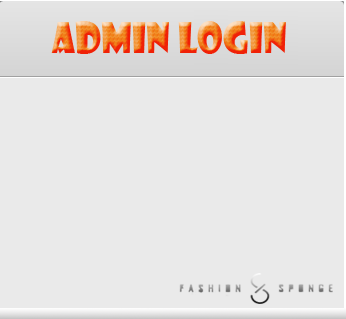
<style>
.page{position:relative;width:346px;height:319px;background:#eaeaea}
.page>*{position:absolute;margin:0}
.t1{font:41.2px "ShowcardGothic-Reg";scale:0.91 1}
</style>
<div class="page">
<p class="t1" style="left:51px;top:21px;width:235px;height:33px">ADMIN LOGIN</p>
</div>
